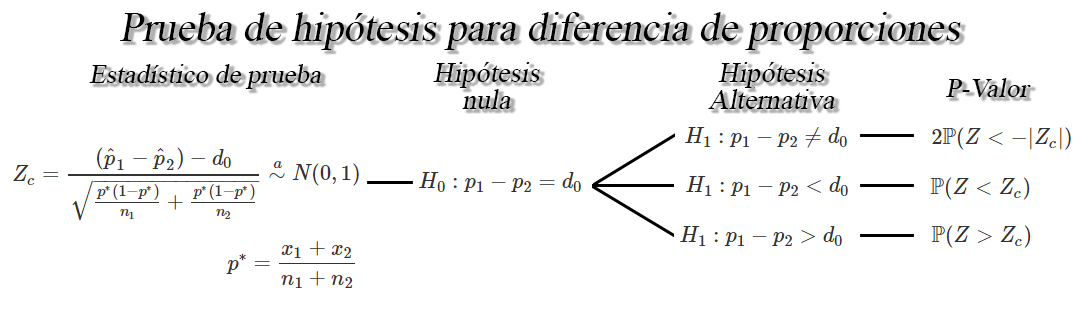
<style>
.page{position:relative;width:1087px;height:314px;background:#ffffff}
.page>*{position:absolute;margin:0}
.t1{font:30.5px "TimesNewRomanPSMT";color:#000000;font-style:italic}
.t2{font:20.4px "TimesNewRomanPSMT";color:#000000;font-style:italic}
.t3{font:21.1px/26.9px "TimesNewRomanPSMT";color:#000000;font-style:italic}
</style>
<div class="page">
<p class="t1" style="left:120px;top:12px;width:841px;height:38px">Prueba de hipótesis para diferencia de proporciones</p>
<p class="t2" style="left:89px;top:64px;width:233px;height:25px">Estadístico de prueba</p>
<p class="t3" style="left:433px;top:62px;width:107px;height:47px;text-align:center">Hipótesis<br>nula</p>
<p class="t3" style="left:708px;top:62px;width:127px;height:47px;text-align:center">Hipótesis<br>Alternativa</p>
<p class="t2" style="left:946px;top:78px;width:85px;height:19px">P-Valor</p>
</div>
